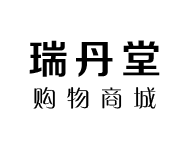
<style>
.page{position:relative;width:190px;height:150px;background:#ffffff}
.page>*{position:absolute;margin:0}
.t1{font:40.4px "FZZZHONGJW--GB1-0";letter-spacing:0.16em;color:#000000}
.t2{font:22.8px "FZZQJW--GB1-0";letter-spacing:0.46em;color:#000000}
</style>
<div class="page">
<p class="t1" style="left:29px;top:40px;width:131px;height:37px">瑞丹堂</p>
<p class="t2" style="left:33px;top:87px;width:123px;height:22px">购物商城</p>
</div>
